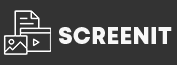
<style>
.page{position:relative;width:177px;height:65px;background:#333333}
.page>*{position:absolute;margin:0}
.t1{font:23px "Mont-HeavyDEMO";color:#f7f7f7;text-transform:uppercase}
</style>
<div class="page">
<p class="t1" style="left:59px;top:27px;width:113px;height:17px">SCREENIT</p>
</div>
